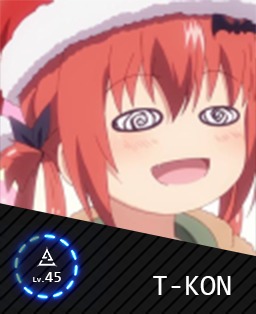
<style>
.page{position:relative;width:256px;height:314px}
.page>*{position:absolute;margin:0}
.t1{font:7.6px "Consolas";color:#ffffff}
.t2{font:15.2px "Consolas";color:#ffffff}
.t3{font:29.2px "Consolas";color:#ffffff}
</style>
<div class="page">
<p class="t1" style="left:33px;top:272px;width:28px;height:10px">Lv.<span class="t2">45</span></p>
<p class="t3" style="left:153px;top:276px;width:78px;height:19px">T-KON</p>
</div>
